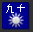
<style>
.page{position:relative;width:33px;height:32px;background:#000090}
.page>*{position:absolute;margin:0}
.t1{font:10.4px "SimSun";color:#ffffff}
</style>
<div class="page">
<p class="t1" style="left:6px;top:4px;width:19px;height:9px">九十</p>
</div>
